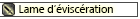
<style>
.page{position:relative;width:140px;height:19px;background:#ffffff}
.page>*{position:absolute;margin:0}
.t1{font:10.9px "LaoUI";color:#000000}
</style>
<div class="page">
<p class="t1" style="left:19px;top:4px;width:94px;height:9px">Lame d’éviscération</p>
</div>
